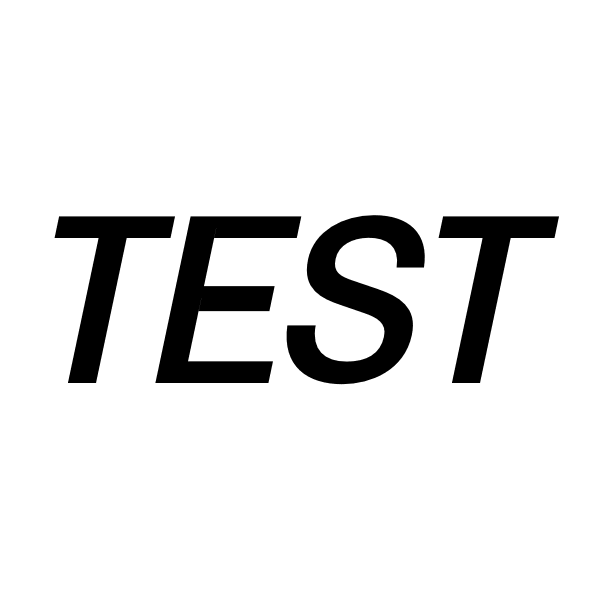
<style>
.page{position:relative;width:600px;height:600px;background:#ffffff}
.page>*{position:absolute;margin:0}
.t1{font:238px "BauhausManifest-BoldItalic";color:#000000}
</style>
<div class="page">
<p class="t1" style="left:54px;top:215px;width:505px;height:170px">TEST</p>
</div>
